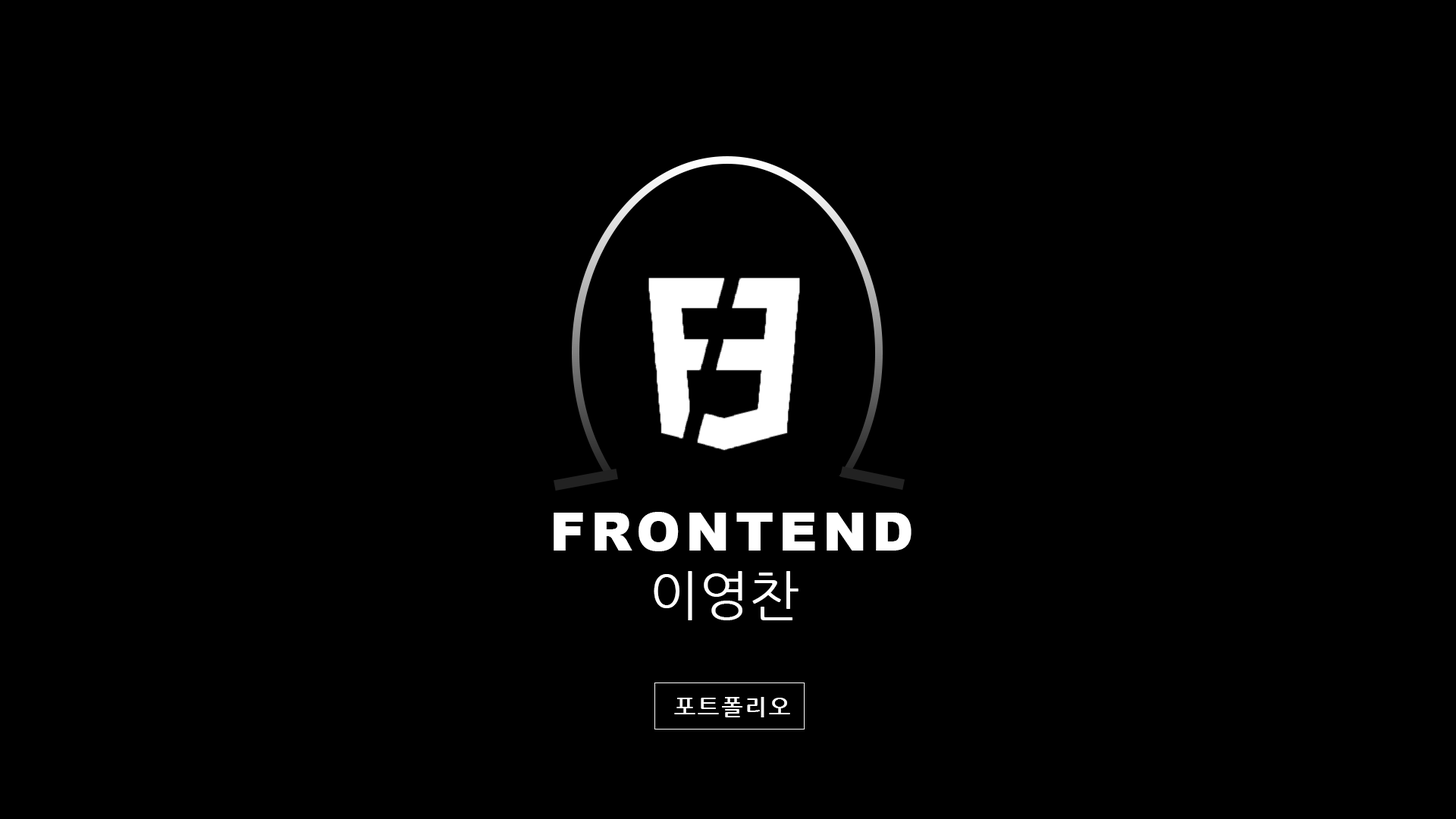
<style>
.page{position:relative;width:1456px;height:819px;background:#000000}
.page>*{position:absolute;margin:0}
.t1{font:53.1px "Arial-Black";letter-spacing:0.1em;color:#ffffff}
.t2{font:53.1px "NanumGothic";letter-spacing:0.005em;color:#ffffff}
.t3{font:22.7px "NanumGothicBold";letter-spacing:0.1em;color:#ffffff}
</style>
<div class="page">
<p class="t1" style="left:554px;top:512px;width:358px;height:39px">FRONTEND</p>
<p class="t2" style="left:654px;top:571px;width:145px;height:49px">이영찬</p>
<p class="t3" style="left:674px;top:697px;width:116px;height:20px">포트폴리오</p>
</div>
